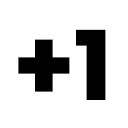
<style>
.page{position:relative;width:128px;height:128px;background:#ffffff}
.page>*{position:absolute;margin:0}
.t1{font:105.5px "Mont-HeavyDEMO";color:#010000}
</style>
<div class="page">
<p class="t1" style="left:18px;top:29px;width:88px;height:71px">+1</p>
</div>
